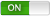
<style>
.page{position:relative;width:50px;height:16px}
.page>*{position:absolute;margin:0}
.t1{font:9px "ArialMT";color:#e8e8e8}
</style>
<div class="page">
<p class="t1" style="left:8px;top:4px;width:13px;height:7px">ON</p>
</div>
